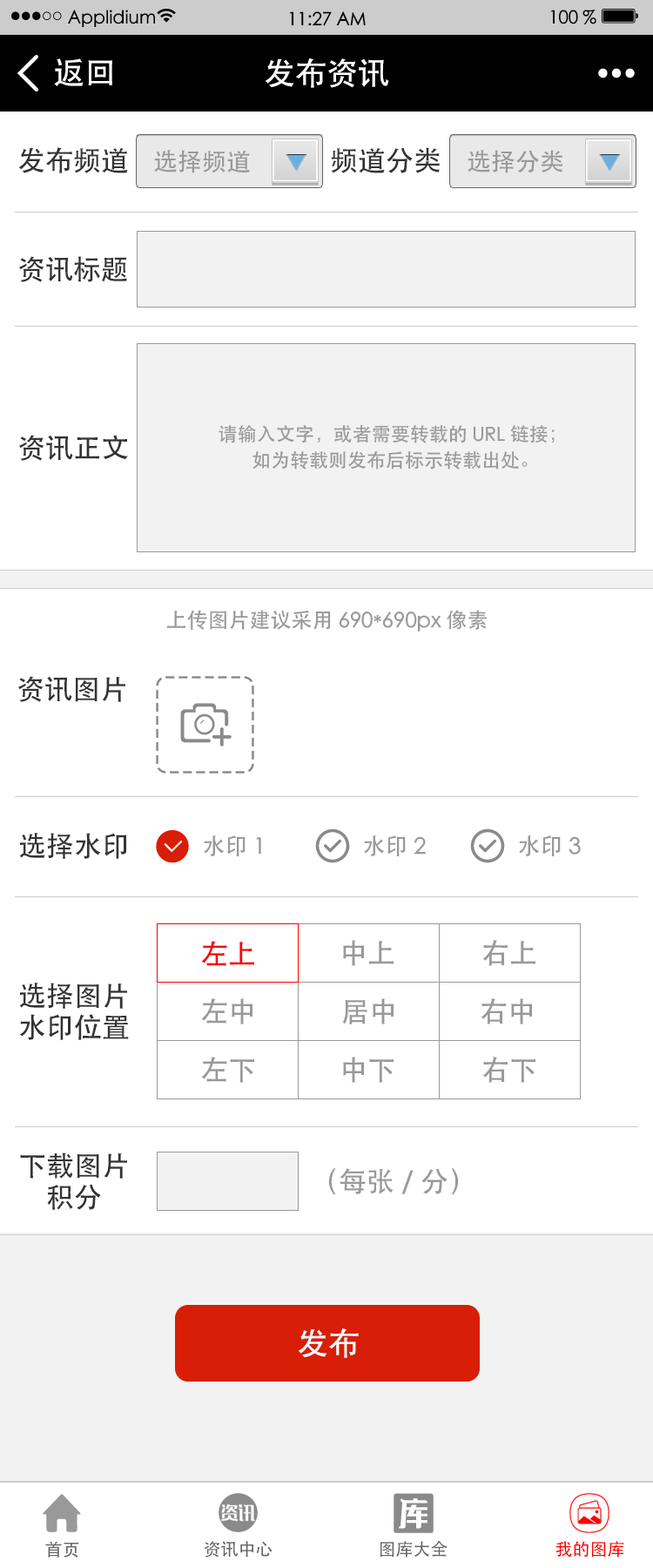
<style>
.page{position:relative;width:653px;height:1568px;background:#ffffff}
.page>*{position:absolute;margin:0}
.t1{font:18.2px "STHeiti";color:#000000}
.t2{font:31.4px "STHeiti";color:#ffffff}
.t3{font:27.9px "STHeiti";color:#333333}
.t4{font:24.4px "STHeiti";color:#999999}
.t5{font:19.2px/26.1px "STHeiti";color:#999999}
.t6{font:20.9px "STHeiti";color:#999999}
.t7{font:22.6px "STHeiti";color:#999999}
.t8{font:27.9px "STHeiti";color:#ff0000}
.t9{font:27.9px "STHeiti";color:#999999}
.t10{font:27.9px/31.4px "STHeiti";color:#333333}
.t11{font:17.4px "STHeiti";color:#666666}
.t12{font:17.4px "STHeiti";color:#ff0000}
</style>
<div class="page">
<p class="t1" style="left:68px;top:10px;width:87px;height:17px">Applidium</p>
<p class="t1" style="left:289px;top:11px;width:77px;height:15px">11:27 AM</p>
<p class="t1" style="left:551px;top:10px;width:46px;height:14px">100 %</p>
<p class="t2" style="left:54px;top:58px;width:58px;height:28px">返回</p>
<p class="t2" style="left:265px;top:58px;width:124px;height:30px">发布资讯</p>
<p class="t3" style="left:18px;top:147px;width:110px;height:26px">发布频道</p>
<p class="t4" style="left:154px;top:150px;width:96px;height:23px">选择频道</p>
<p class="t3" style="left:331px;top:147px;width:109px;height:26px">频道分类</p>
<p class="t4" style="left:468px;top:150px;width:95px;height:23px">选择分类</p>
<p class="t3" style="left:19px;top:256px;width:108px;height:26px">资讯标题</p>
<p class="t5" style="left:219px;top:424px;width:336px;height:46px;text-align:center">请输入文字，或者需要转载的URL链接；<br>如为转载则发布后标示转载出处。</p>
<p class="t3" style="left:19px;top:435px;width:109px;height:26px">资讯正文</p>
<p class="t6" style="left:166px;top:610px;width:321px;height:22px">上传图片建议采用690*690px像素</p>
<p class="t3" style="left:18px;top:676px;width:107px;height:26px">资讯图片</p>
<p class="t3" style="left:19px;top:833px;width:108px;height:26px">选择水印</p>
<p class="t7" style="left:204px;top:835px;width:57px;height:21px">水印1</p>
<p class="t7" style="left:364px;top:835px;width:62px;height:21px">水印2</p>
<p class="t7" style="left:519px;top:835px;width:62px;height:21px">水印3</p>
<p class="t8" style="left:201px;top:941px;width:53px;height:25px">左上</p>
<p class="t9" style="left:343px;top:940px;width:51px;height:26px">中上</p>
<p class="t9" style="left:483px;top:940px;width:53px;height:26px">右上</p>
<p class="t10" style="left:19px;top:983px;width:110px;height:57px">选择图片<br>水印位置</p>
<p class="t9" style="left:201px;top:998px;width:52px;height:26px">左中</p>
<p class="t9" style="left:342px;top:998px;width:52px;height:26px">居中</p>
<p class="t9" style="left:481px;top:998px;width:51px;height:26px">右中</p>
<p class="t9" style="left:201px;top:1057px;width:53px;height:26px">左下</p>
<p class="t9" style="left:343px;top:1057px;width:51px;height:26px">中下</p>
<p class="t9" style="left:483px;top:1057px;width:53px;height:26px">右下</p>
<p class="t10" style="left:20px;top:1152px;width:107px;height:58px;text-align:center">下载图片<br>积分</p>
<p class="t9" style="left:328px;top:1168px;width:130px;height:27px">（每张/分）</p>
<p class="t2" style="left:298px;top:1328px;width:61px;height:30px">发布</p>
<p class="t11" style="left:45px;top:1541px;width:34px;height:17px">首页</p>
<p class="t11" style="left:204px;top:1541px;width:69px;height:17px">资讯中心</p>
<p class="t11" style="left:380px;top:1540px;width:68px;height:18px">图库大全</p>
<p class="t12" style="left:556px;top:1541px;width:69px;height:17px">我的图库</p>
</div>
